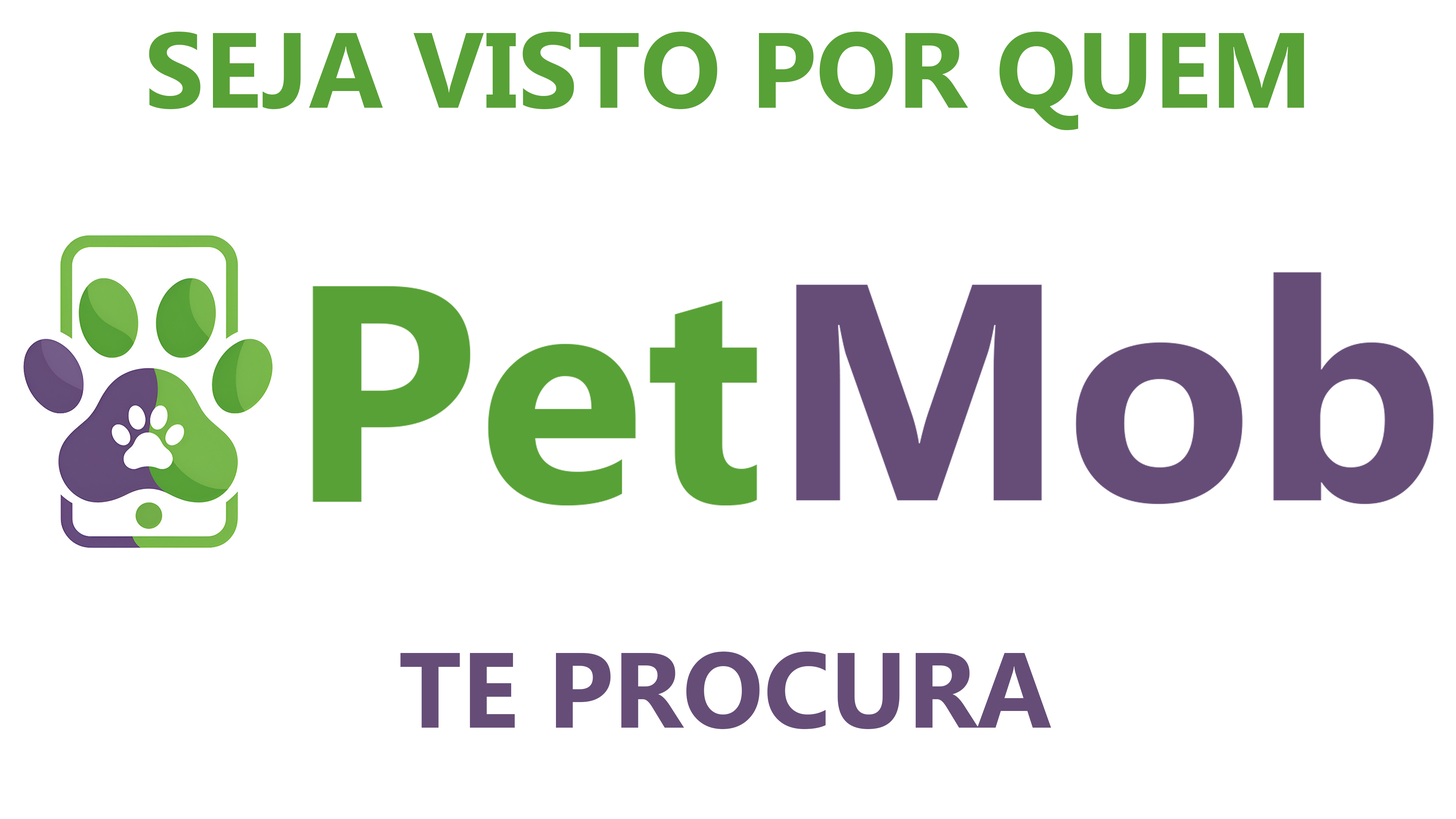
<style>
.page{position:relative;width:1456px;height:819px;background:#ffffff}
.page>*{position:absolute;margin:0}
.t1{font:106.6px "Ebrima-Bold";color:#58a136}
.t2{font:106.6px "Ebrima-Bold";color:#664d78}
</style>
<div class="page">
<p class="t1" style="left:149px;top:31px;width:1155px;height:99px">SEJA VISTO POR QUEM</p>
<p class="t2" style="left:400px;top:651px;width:651px;height:78px">TE PROCURA</p>
</div>
